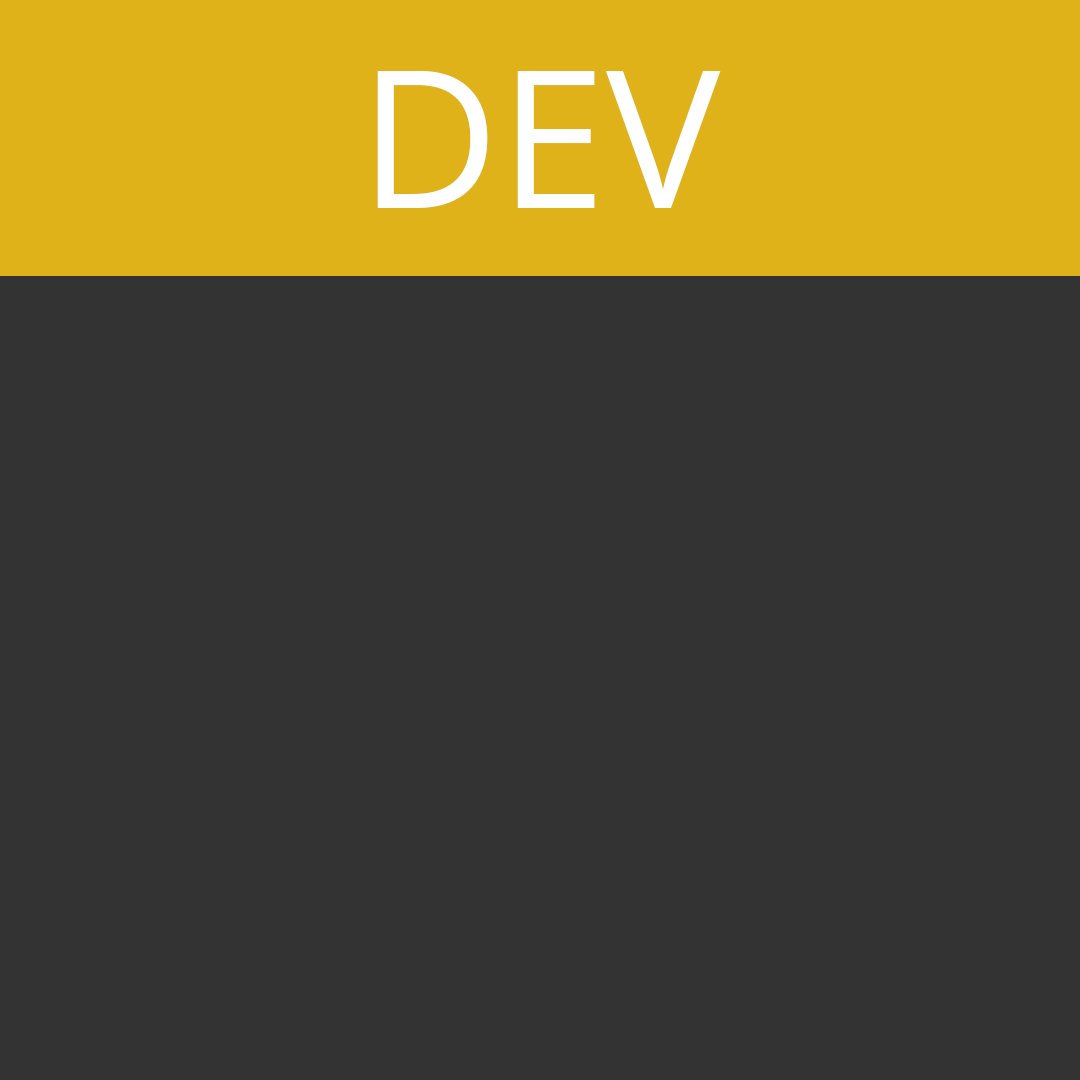
<style>
.page{position:relative;width:1080px;height:1080px;background:#333333}
.page>*{position:absolute;margin:0}
.t1{font:192px "OpenSans";color:#ffffff}
</style>
<div class="page">
<p class="t1" style="left:377px;top:71px;width:344px;height:137px">DEV</p>
</div>
